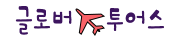
<style>
.page{position:relative;width:180px;height:40px;background:#ffffff}
.page>*{position:absolute;margin:0}
.t1{font:30px "HOONNuguriOTFR";color:#3d155f}
</style>
<div class="page">
<p class="t1" style="left:15px;top:6px;width:149px;height:29px">글로버    투어스</p>
</div>
